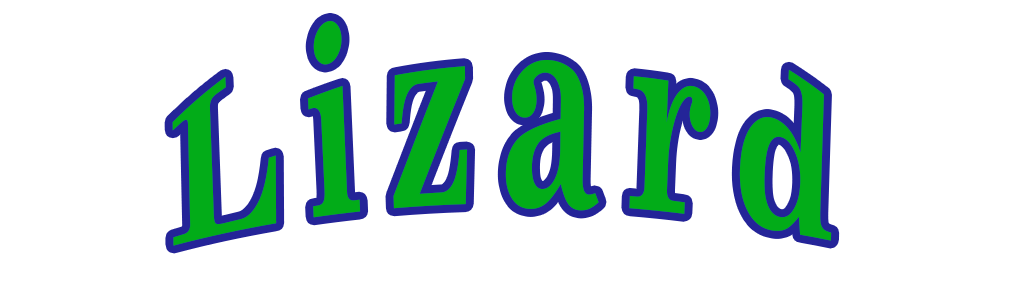
<style>
.page{position:relative;width:1024px;height:300px;background:#ffffff}
.page>*{position:absolute;margin:0}
.t1{font:166px "CenturySchoolbook-Bold";letter-spacing:0.12em;color:#02ac18}
</style>
<div class="page">
<p class="t1" style="left:172px;top:21px;width:660px;height:225px">Lizard</p>
</div>
